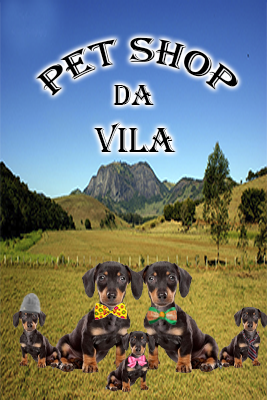
<style>
.page{position:relative;width:267px;height:400px}
.page>*{position:absolute;margin:0}
.t1{font:36px "Algerian";color:#000000}
.t2{font:30px "Algerian";color:#000000}
</style>
<div class="page">
<p class="t1" style="left:36px;top:37px;width:202px;height:59px">pet shop</p>
<p class="t2" style="left:113px;top:85px;width:41px;height:20px">da</p>
<p class="t1" style="left:94px;top:122px;width:82px;height:30px">vila</p>
</div>
